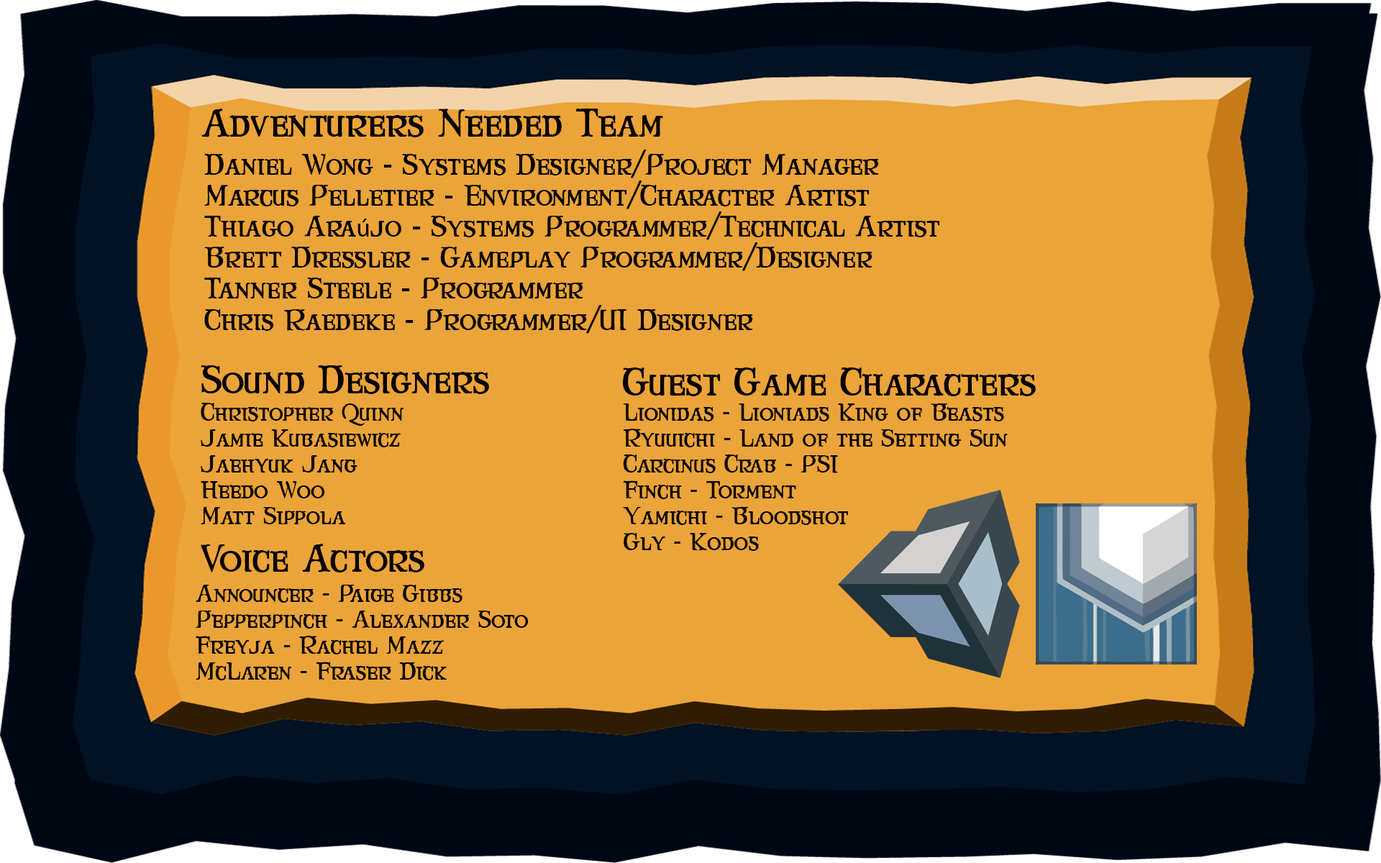
<style>
.page{position:relative;width:1381px;height:863px;background:#eba439}
.page>*{position:absolute;margin:0}
.t1{font:34.5px "MaryJaneCavazos";color:#070102}
.t2{font:25.9px "MaryJaneCavazos";color:#070102}
.t3{font:25.9px "MyriadPro-Regular";color:#070102}
.t4{font:21.6px "MaryJaneCavazos";color:#070102}
</style>
<div class="page">
<p class="t1" style="left:201px;top:109px;width:462px;height:28px">Adventurers Needed Team</p>
<p class="t2" style="left:204px;top:150px;width:736px;height:184px">Daniel Wong - Systems Designer/Project Manager<br>Marcus Pelletier - Environment/Character Artist<br>Thiago Ara<span class="t3">ú</span>jo - Systems Programmer/Technical Artist<br>Brett Dressler - Gameplay Programmer/Designer<br>Tanner Steele - Programmer<br>Chris Raedeke - Programmer/UI Designer</p>
<p class="t1" style="left:201px;top:365px;width:288px;height:29px">Sound Designers</p>
<p class="t1" style="left:622px;top:368px;width:414px;height:28px">Guest Game Characters</p>
<p class="t4" style="left:201px;top:403px;width:203px;height:121px">Christopher Quinn<br>Jamie Kubasiewicz<br>Jaehyuk Jang<br>Heedo Woo<br>Matt Sippola</p>
<p class="t4" style="left:623px;top:404px;width:385px;height:147px">Lionidas - Lioniads King of Beasts<br>Ryuuichi - Land of the Setting Sun<br>Carcinus Crab - PSI<br>Finch - Torment<br>Yamichi - Bloodshot<br>Gly - Kodos</p>
<p class="t1" style="left:201px;top:544px;width:223px;height:29px">Voice Actors</p>
<p class="t4" style="left:196px;top:585px;width:333px;height:96px">Announcer - Paige Gibbs<br>Pepperpinch - Alexander Soto<br>Freyja - Rachel Mazz<br>McLaren - Fraser Dick</p>
</div>
